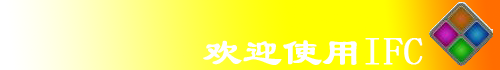
<style>
.page{position:relative;width:500px;height:70px}
.page>*{position:absolute;margin:0}
.t1{font:39px "LiSu";color:#ffffff;font-weight:bold}
</style>
<div class="page">
<p class="t1" style="left:203px;top:38px;width:220px;height:27px">欢迎使用IFC</p>
</div>
